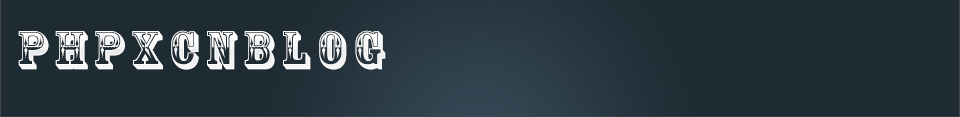
<style>
.page{position:relative;width:960px;height:117px;background:#1e2b33}
.page>*{position:absolute;margin:0}
.t1{font:51px "RosewoodStd-Regular";letter-spacing:0.15em;color:#fffefe}
</style>
<div class="page">
<p class="t1" style="left:18px;top:30px;width:368px;height:40px">phpxcnblog</p>
</div>
